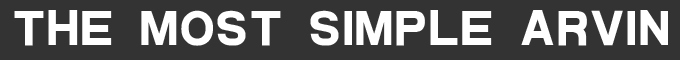
<style>
.page{position:relative;width:680px;height:60px;background:#333333}
.page>*{position:absolute;margin:0}
.t1{font:50px "HYb9gj";color:#ffffff}
</style>
<div class="page">
<p class="t1" style="left:14px;top:10px;width:654px;height:36px">THE MOST SIMPLE ARVIN</p>
</div>
